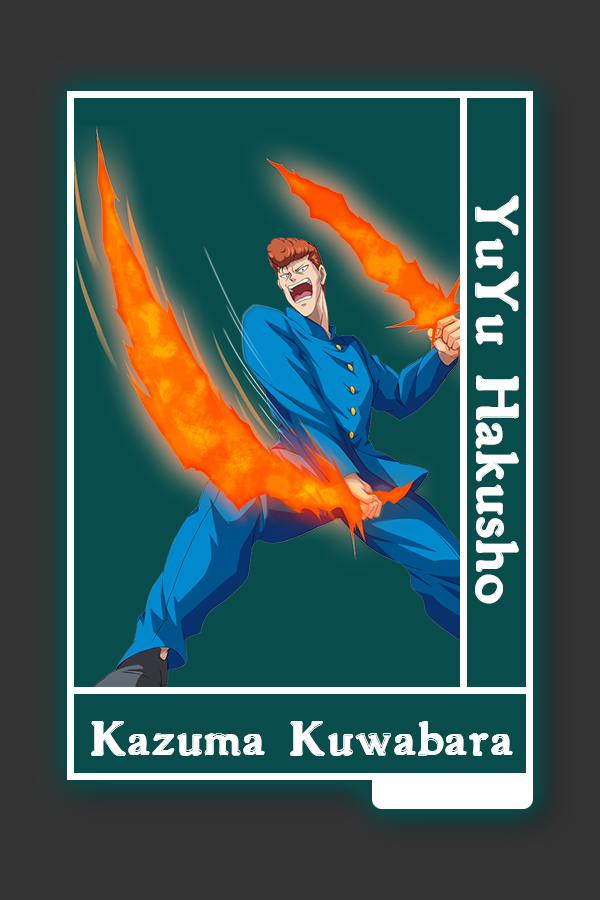
<style>
.page{position:relative;width:600px;height:900px;background:#084d4c}
.page>*{position:absolute;margin:0}
.t1{font:55.2px "GranthamOutline";color:#ffffff}
.t2{font:45.6px "GranthamOutline";color:#ffffff}
</style>
<div class="page">
<p class="t1" style="left:475px;top:195px;width:44px;height:409px;rotate:90deg">YuYu Hakusho</p>
<p class="t2" style="left:91px;top:721px;width:422px;height:35px">Kazuma Kuwabara</p>
</div>
